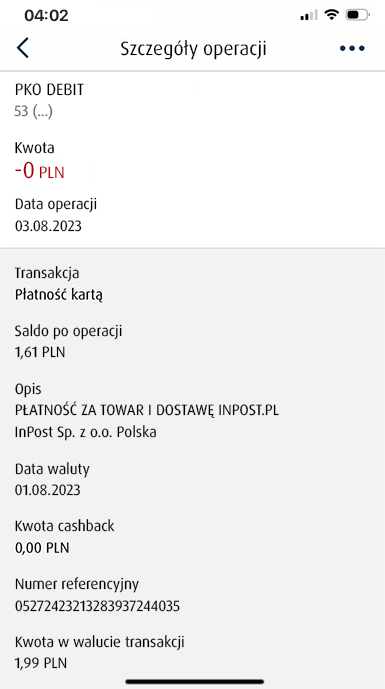
<style>
.page{position:relative;width:385px;height:689px;background:#f2f2f2}
.page>*{position:absolute;margin:0}
.t1{font:16px "SFProDisplay-Bold";color:#212121}
.t2{font:19.3px "DaxPro-Regular";color:#000000}
.t3{font:16.4px "DaxPro-Regular";color:#000000}
.t4{font:15px "DaxPro-Regular";color:#686868}
.t5{font:15.5px "DaxPro-Regular";color:#000000}
.t6{font:23.2px "DaxPro-Regular";color:#ae0007}
.t7{font:16.4px "DaxPro-Regular";color:#ae0007}
.t8{font:15px "DaxPro-Regular";color:#000000}
.t9{font:15px "DaxPro-Regular";color:#010101}
</style>
<div class="page">
<p class="t1" style="left:24px;top:9px;width:44px;height:13px">04:02</p>
<p class="t2" style="left:121px;top:40px;width:145px;height:20px">Szczegóły operacji</p>
<p class="t3" style="left:15px;top:83px;width:69px;height:13px">PKO DEBIT</p>
<p class="t4" style="left:14px;top:104px;width:39px;height:16px">53 (...)</p>
<p class="t5" style="left:15px;top:142px;width:39px;height:12px">Kwota</p>
<p class="t6" style="left:15px;top:161px;width:19px;height:18px">-0</p>
<p class="t7" style="left:39px;top:166px;width:25px;height:13px">PLN</p>
<p class="t8" style="left:15px;top:197px;width:82px;height:16px">Data operacji</p>
<p class="t8" style="left:15px;top:220px;width:67px;height:12px">03.08.2023</p>
<p class="t8" style="left:14px;top:266px;width:65px;height:16px">Transakcja</p>
<p class="t8" style="left:15px;top:324px;width:107px;height:16px">Saldo po operacji</p>
<p class="t8" style="left:15px;top:346px;width:50px;height:14px">1,61 PLN</p>
<p class="t8" style="left:15px;top:382px;width:26px;height:16px">Opis</p>
<p class="t8" style="left:15px;top:401px;width:264px;height:17px">PŁATNOŚĆ ZA TOWAR I DOSTAWĘ INPOST.PL</p>
<p class="t8" style="left:15px;top:425px;width:141px;height:16px">InPost Sp. z o.o. Polska</p>
<p class="t8" style="left:15px;top:462px;width:75px;height:16px">Data waluty</p>
<p class="t8" style="left:15px;top:484px;width:65px;height:12px">01.08.2023</p>
<p class="t8" style="left:15px;top:519px;width:100px;height:13px">Kwota cashback</p>
<p class="t8" style="left:15px;top:577px;width:124px;height:16px">Numer referencyjny</p>
<p class="t8" style="left:15px;top:600px;width:165px;height:12px">05272423213283937244035</p>
<p class="t8" style="left:15px;top:635px;width:169px;height:16px">Kwota w walucie transakcji</p>
<p class="t9" style="left:14px;top:657px;width:53px;height:14px">1,99 PLN</p>
</div>
